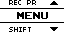
<style>
.page{position:relative;width:64px;height:32px;background:#ffffff}
.page>*{position:absolute;margin:0}
.t1{font:8px "04b03";color:#000000;scale:1.06 1}
.t2{font:14px "ArcadeClassic";color:#000000;scale:1.05 1}
</style>
<div class="page">
<p class="t1" style="left:9px;top:0px;width:27px;height:5px">REC PR</p>
<p class="t2" style="left:17px;top:12px;width:31px;height:7px">MENU</p>
<p class="t1" style="left:9px;top:27px;width:22px;height:5px">SHIFT</p>
</div>
